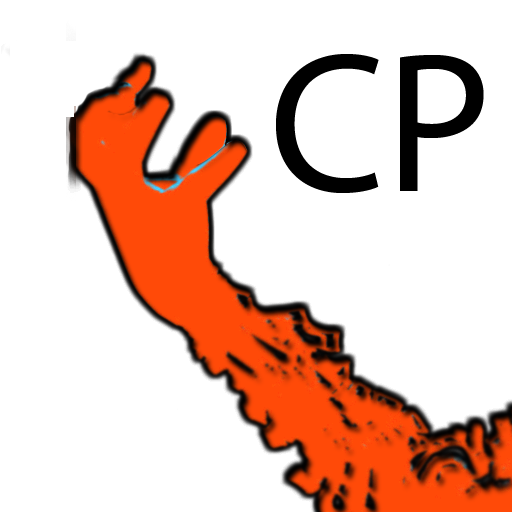
<style>
.page{position:relative;width:512px;height:512px;background:#ffffff}
.page>*{position:absolute;margin:0}
.t1{font:200px "MyriadPro-Regular";color:#000000}
</style>
<div class="page">
<p class="t1" style="left:276px;top:54px;width:208px;height:139px">CP</p>
</div>
